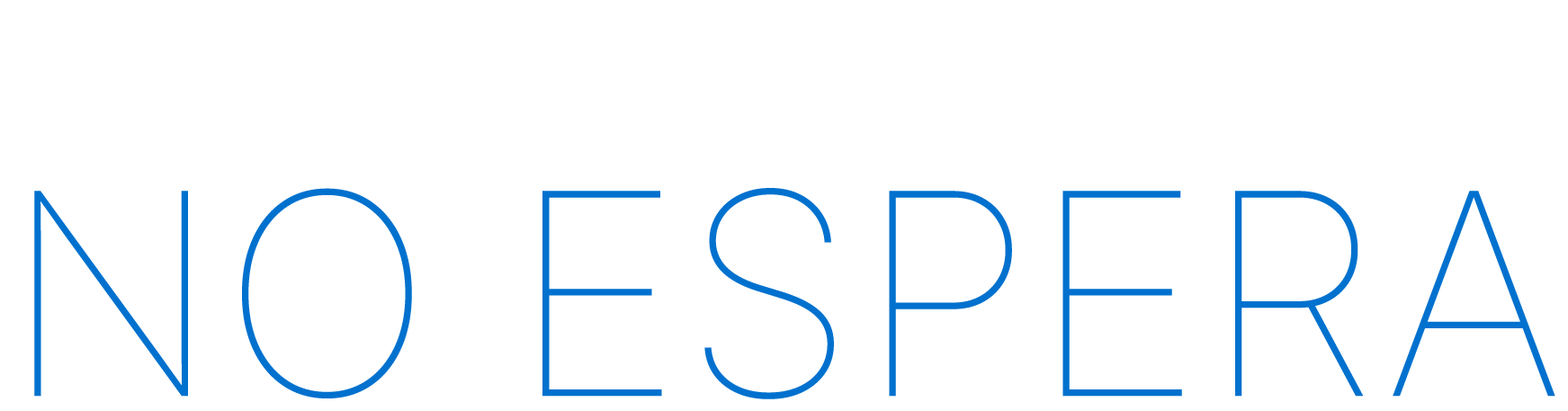
<style>
.page{position:relative;width:1568px;height:411px;background:#ffffff}
.page>*{position:absolute;margin:0}
.t1{font:281.6px/234.8px "Inter24pt-Thin";letter-spacing:0.026em;color:#0071ce;text-transform:uppercase}
.t2{font:180.8px "Inter28pt-Medium";letter-spacing:0.026em;color:#ffffff;text-transform:uppercase}
.t3{font:180.8px/245.6px "Inter28pt-Medium";letter-spacing:0.026em;color:#ffffff;text-transform:uppercase}
</style>
<div class="page">
<p class="t1" style="left:25px;top:27px;width:1530px;height:372px;text-align:center"><span class="t2">el mundo </span><span class="t3">tech<br></span>no espera</p>
</div>
